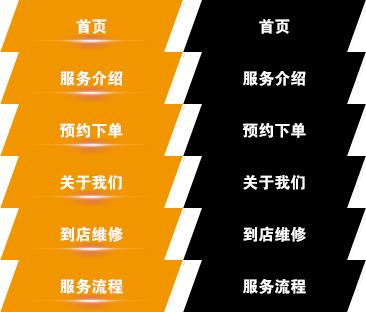
<style>
.page{position:relative;width:366px;height:312px;background:#000000}
.page>*{position:absolute;margin:0}
.t1{font:16px "FZDHTJW--GB1-0";color:#ffffff}
</style>
<div class="page">
<p class="t1" style="left:76px;top:19px;width:31px;height:15px">首页</p>
<p class="t1" style="left:259px;top:19px;width:31px;height:15px">首页</p>
<p class="t1" style="left:60px;top:71px;width:63px;height:15px">服务介绍</p>
<p class="t1" style="left:243px;top:71px;width:63px;height:15px">服务介绍</p>
<p class="t1" style="left:60px;top:122px;width:63px;height:16px">预约下单</p>
<p class="t1" style="left:243px;top:122px;width:63px;height:16px">预约下单</p>
<p class="t1" style="left:60px;top:175px;width:62px;height:15px">关于我们</p>
<p class="t1" style="left:243px;top:175px;width:62px;height:15px">关于我们</p>
<p class="t1" style="left:60px;top:226px;width:63px;height:16px">到店维修</p>
<p class="t1" style="left:243px;top:226px;width:63px;height:16px">到店维修</p>
<p class="t1" style="left:60px;top:279px;width:63px;height:15px">服务流程</p>
<p class="t1" style="left:243px;top:279px;width:63px;height:15px">服务流程</p>
</div>
